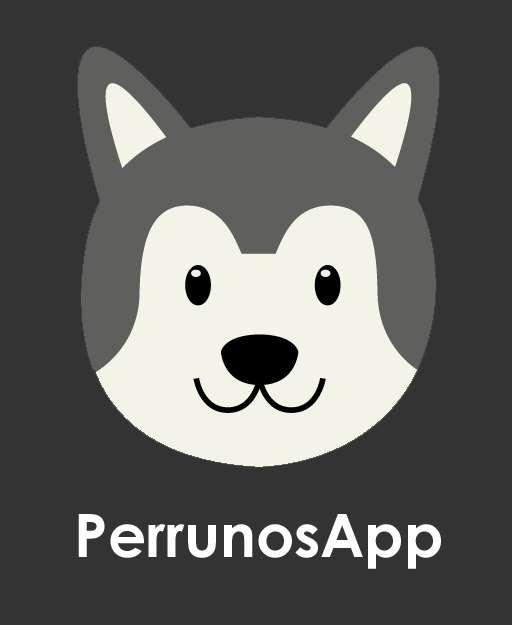
<style>
.page{position:relative;width:512px;height:625px;background:#333333}
.page>*{position:absolute;margin:0}
.t1{font:60px "CenturyGothic-Bold";color:#ffffff}
</style>
<div class="page">
<p class="t1" style="left:78px;top:514px;width:363px;height:55px">PerrunosApp</p>
</div>
